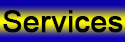
<style>
.page{position:relative;width:125px;height:42px}
.page>*{position:absolute;margin:0}
.t1{font:30px "ArialMT";color:#000301;font-weight:bold}
</style>
<div class="page">
<p class="t1" style="left:3px;top:10px;width:120px;height:23px">Services</p>
</div>
